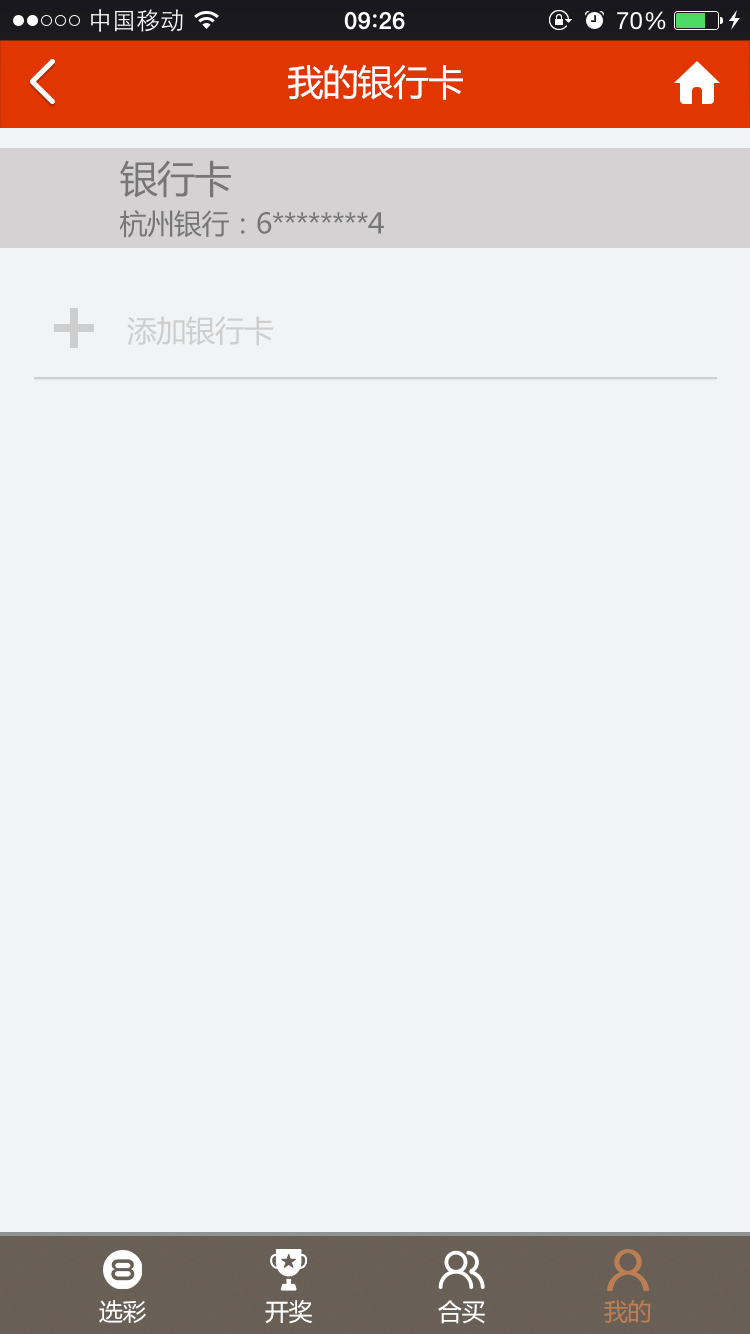
<style>
.page{position:relative;width:750px;height:1334px;background:#f2f3f5}
.page>*{position:absolute;margin:0}
.t1{font:36px "MicrosoftYaHei";letter-spacing:-0.025em;color:#ffffff}
.t2{font:38px "MicrosoftYaHei";letter-spacing:-0.025em;color:#767676}
.t3{font:28px "MicrosoftYaHei";letter-spacing:-0.025em;color:#767676}
.t4{font:30px "MicrosoftYaHei";letter-spacing:-0.025em;color:#cecece}
.t5{font:24px "MicrosoftYaHei";letter-spacing:-0.025em;color:#ffffff}
.t6{font:24px "MicrosoftYaHei";letter-spacing:-0.025em;color:#bc7e53}
</style>
<div class="page">
<p class="t1" style="left:288px;top:64px;width:175px;height:36px">我的银行卡</p>
<p class="t2" style="left:120px;top:160px;width:111px;height:38px">银行卡</p>
<p class="t3" style="left:119px;top:210px;width:265px;height:28px">杭州银行：6********4</p>
<p class="t4" style="left:127px;top:316px;width:147px;height:30px">添加银行卡</p>
<p class="t5" style="left:99px;top:1300px;width:47px;height:23px">选彩</p>
<p class="t5" style="left:265px;top:1300px;width:48px;height:24px">开奖</p>
<p class="t5" style="left:438px;top:1300px;width:47px;height:24px">合买</p>
<p class="t6" style="left:604px;top:1300px;width:47px;height:23px">我的</p>
</div>
